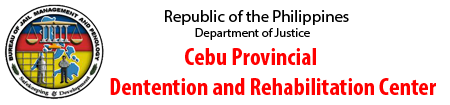
<style>
.page{position:relative;width:450px;height:105px;background:#ffffff}
.page>*{position:absolute;margin:0}
.t1{font:16.7px "MyriadPro-Regular";color:#000000}
.t2{font:12.5px "MyriadPro-Regular";color:#000000}
.t3{font:25px "MyriadPro-BoldCond";color:#ff0000}
</style>
<div class="page">
<p class="t1" style="left:165px;top:10px;width:184px;height:15px">Republic of the Philippines</p>
<p class="t2" style="left:195px;top:28px;width:115px;height:12px">Department of Justice</p>
<p class="t3" style="left:110px;top:48px;width:326px;height:47px">Cebu Provincial <br>Dentention and Rehabilitation Center</p>
</div>
